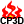
<style>
.page{position:relative;width:24px;height:24px;background:#ffffff}
.page>*{position:absolute;margin:0}
.t1{font:9px "Arial-BoldMT";color:#000000}
</style>
<div class="page">
<p class="t1" style="left:0px;top:17px;width:24px;height:7px">CP3D</p>
</div>
